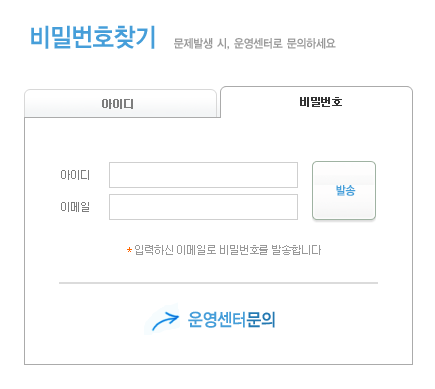
<style>
.page{position:relative;width:435px;height:389px;background:#ffffff}
.page>*{position:absolute;margin:0}
.t1{font:26px "YDIYGO140-KSCpc-EUC-H";letter-spacing:-0.1em;color:#469ed9;scale:0.9 1}
.t2{font:12px "YDIYGO140-KSCpc-EUC-H";letter-spacing:-0.1em;color:#999999;scale:0.9 1}
.t3{font:11px "Dotum";letter-spacing:-0.1em;color:#7d7d7d;font-weight:bold}
.t4{font:11px "Dotum";letter-spacing:-0.1em;color:#333333;font-weight:bold}
.t5{font:11px "Dotum";letter-spacing:-0.1em;color:#7d7d7d}
.t6{font:12px "YDIYGO140-KSCpc-EUC-H";letter-spacing:-0.1em;color:#469ed9;scale:0.9 1}
.t7{font:11px "Dotum";letter-spacing:-0.1em;color:#999999}
.t8{font:11px "Dotum";letter-spacing:-0.1em;color:#ff6600}
.t9{font:18px "YDIYGO140-KSCpc-EUC-H";letter-spacing:-0.1em;color:#469ed9;scale:0.9 1}
.t10{font:18px "YDIYGO140-KSCpc-EUC-H";letter-spacing:-0.1em;color:#2479b2;scale:0.9 1}
</style>
<div class="page">
<p class="t1" style="left:31px;top:25px;width:124px;height:24px">비밀번호찾기</p>
<p class="t2" style="left:174px;top:38px;width:162px;height:12px">문제발생 시, 운영센터로 문의하세요</p>
<p class="t3" style="left:102px;top:99px;width:31px;height:10px">아이디</p>
<p class="t4" style="left:300px;top:97px;width:42px;height:10px">비밀번호</p>
<p class="t5" style="left:61px;top:170px;width:28px;height:10px">아이디</p>
<p class="t6" style="left:336px;top:185px;width:20px;height:11px">발송</p>
<p class="t5" style="left:61px;top:202px;width:28px;height:10px">이메일</p>
<p class="t7" style="left:127px;top:245px;width:194px;height:10px"><span class="t8">*</span> 입력하신 이메일로 비밀번호를 발송합니다</p>
<p class="t9" style="left:188px;top:311px;width:87px;height:17px">운영센터<span class="t10">문의</span></p>
</div>
